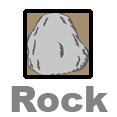
<style>
.page{position:relative;width:117px;height:117px;background:#ffffff}
.page>*{position:absolute;margin:0}
.t1{font:36px "Arial-Black";color:#848282}
</style>
<div class="page">
<p class="t1" style="left:11px;top:86px;width:97px;height:26px">Rock</p>
</div>
